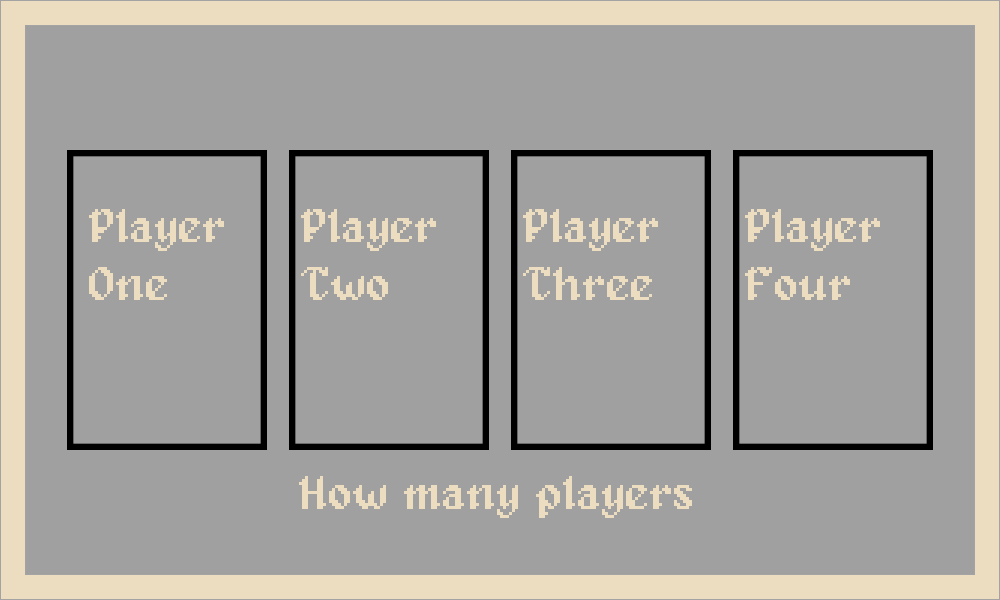
<style>
.page{position:relative;width:1000px;height:600px;background:#a0a0a0}
.page>*{position:absolute;margin:0}
.t1{font:48px "Alagard";color:#ecddc0}
</style>
<div class="page">
<p class="t1" style="left:89px;top:209px;width:135px;height:91px">Player One</p>
<p class="t1" style="left:301px;top:209px;width:135px;height:91px">Player Two</p>
<p class="t1" style="left:523px;top:209px;width:135px;height:91px">Player Three</p>
<p class="t1" style="left:745px;top:209px;width:135px;height:91px">Player Four</p>
<p class="t1" style="left:299px;top:476px;width:393px;height:42px">How many players</p>
</div>
